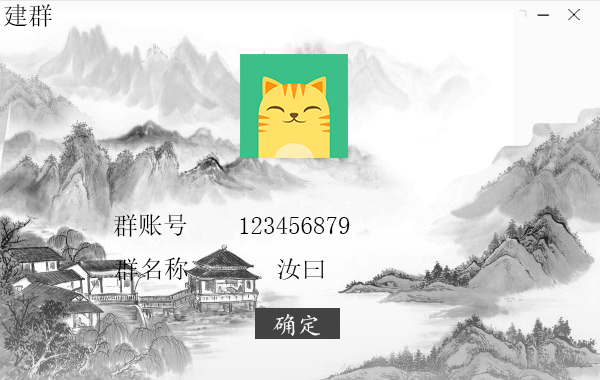
<style>
.page{position:relative;width:600px;height:380px}
.page>*{position:absolute;margin:0}
.t1{font:25px "SimSun";color:#000000}
.t2{font:25px "SimSun";color:#020202}
.t3{font:25px "¿¬Ìå";color:#fefefe}
</style>
<div class="page">
<p class="t1" style="left:4px;top:4px;width:48px;height:23px">建群</p>
<p class="t2" style="left:114px;top:214px;width:236px;height:23px">群账号    123456879</p>
<p class="t2" style="left:115px;top:257px;width:209px;height:24px">群名称       汝曰</p>
<p class="t3" style="left:273px;top:314px;width:47px;height:22px">确定</p>
</div>
